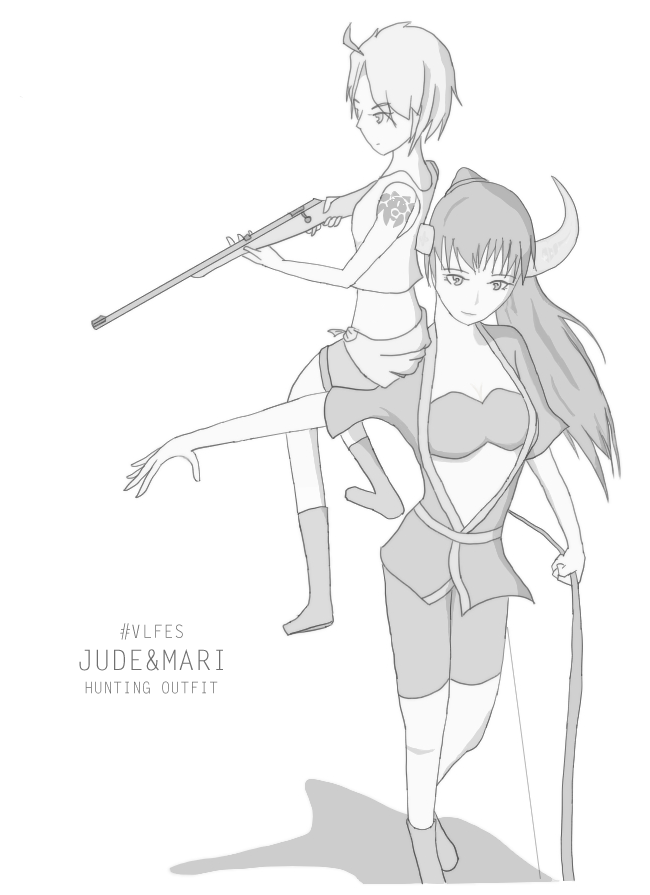
<style>
.page{position:relative;width:650px;height:895px;background:#ffffff}
.page>*{position:absolute;margin:0}
.t1{font:18px "LetterGothicStd";color:#707070}
.t2{font:28px "LetterGothicStd";color:#707070}
.t3{font:16px "LetterGothicStd";color:#707070}
</style>
<div class="page">
<p class="t1" style="left:120px;top:623px;width:63px;height:17px">#VLFES</p>
<p class="t2" style="left:79px;top:649px;width:144px;height:22px">JUDE&amp;MARI</p>
<p class="t3" style="left:85px;top:681px;width:133px;height:13px">HUNTING OUTFIT</p>
</div>
